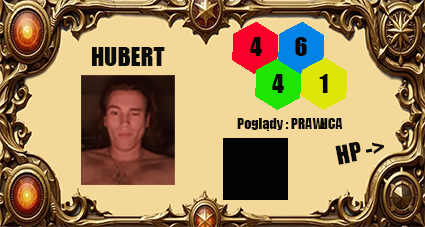
<style>
.page{position:relative;width:425px;height:227px;background:#f3d89a}
.page>*{position:absolute;margin:0}
.t1{font:24px "Impact";color:#060605}
.t2{font:24px "Impact";color:#0b0b0a}
.t3{font:14px "Impact";color:#0b0b0a}
</style>
<div class="page">
<p class="t1" style="left:250px;top:37px;width:12px;height:19px">4</p>
<p class="t1" style="left:295px;top:37px;width:12px;height:19px">6</p>
<p class="t2" style="left:92px;top:47px;width:73px;height:19px">HUBERT</p>
<p class="t1" style="left:272px;top:74px;width:12px;height:19px">4</p>
<p class="t1" style="left:319px;top:74px;width:9px;height:19px">1</p>
<p class="t3" style="left:237px;top:118px;width:106px;height:13px">Poglądy : PRAWICA</p>
<p class="t2" style="left:335px;top:142px;width:50px;height:23px;rotate:-11deg">HP -&gt;</p>
</div>
